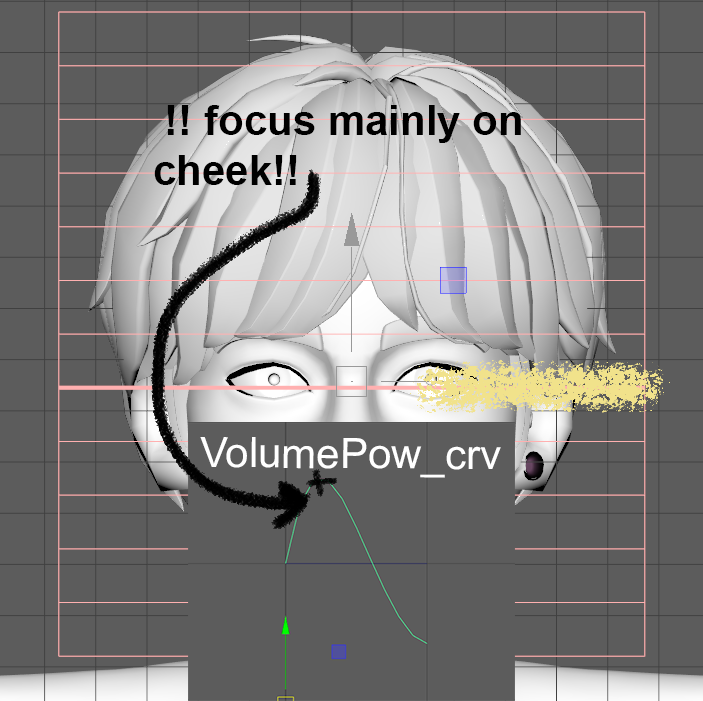
<style>
.page{position:relative;width:703px;height:701px;background:#5c5c5c}
.page>*{position:absolute;margin:0}
.t1{font:42px "Arial-BoldMT";color:#000000}
.t2{font:42px "ArialMT";color:#ffffff}
</style>
<div class="page">
<p class="t1" style="left:154px;top:105px;width:367px;height:80px">!! focus mainly on cheek!!</p>
<p class="t2" style="left:200px;top:437px;width:301px;height:41px">VolumePow_crv</p>
</div>
